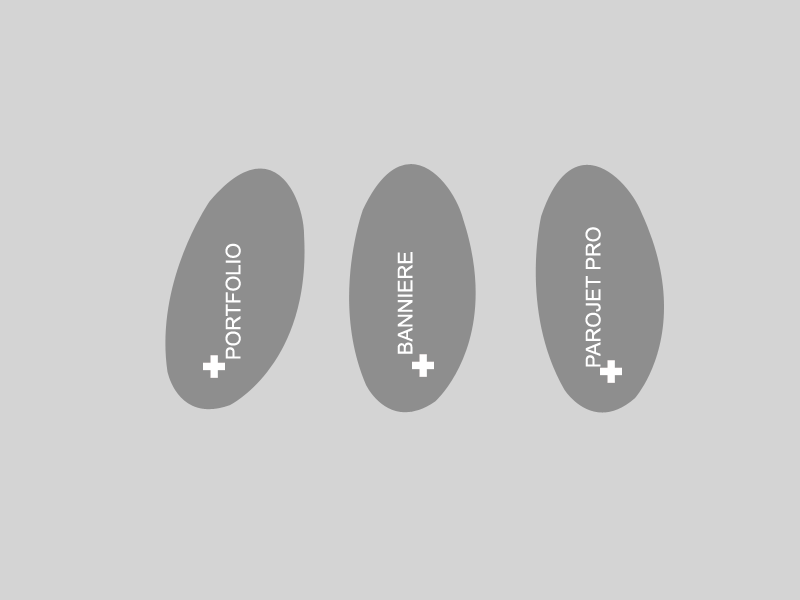
<style>
.page{position:relative;width:800px;height:600px;background:#d4d4d4}
.page>*{position:absolute;margin:0}
.t1{font:20.3px "ArialMT";color:#ffffff;text-transform:uppercase}
</style>
<div class="page">
<p class="t1" style="left:585px;top:227px;width:16px;height:140px;rotate:-90deg">PAROJET PRO</p>
<p class="t1" style="left:225px;top:243px;width:16px;height:116px;rotate:-90deg">PORTFOLIO</p>
<p class="t1" style="left:397px;top:252px;width:16px;height:102px;rotate:-90deg">BANNIERE</p>
</div>
